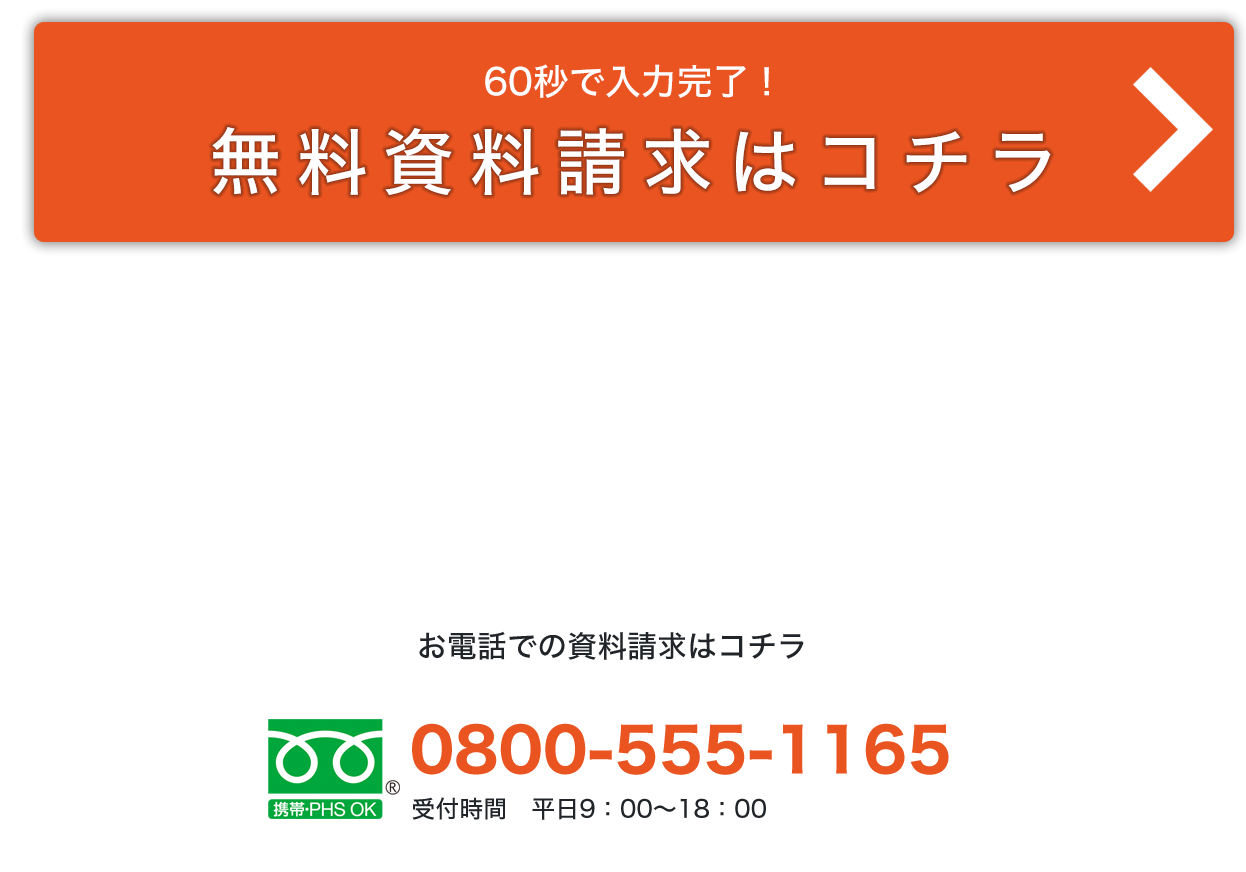
<style>
.page{position:relative;width:1246px;height:872px;background:#ffffff}
.page>*{position:absolute;margin:0}
.t1{font:36px "HiraginoSans-W5";color:#ffffff}
.t2{font:72px "HiraginoSans-W5";letter-spacing:0.2em;color:#ffffff}
.t3{font:30px "HiraginoSans-W5";color:#212529}
.t4{font:60px "HiraginoSans-W7";color:#e95420}
.t5{font:24px "HiraginoSans-W5";color:#212529}
</style>
<div class="page">
<p class="t1" style="left:485px;top:64px;width:284px;height:34px">60秒で入力完了！</p>
<p class="t2" style="left:212px;top:127px;width:839px;height:68px">無料資料請求はコチラ</p>
<p class="t3" style="left:419px;top:631px;width:385px;height:29px">お電話での資料請求はコチラ</p>
<p class="t4" style="left:412px;top:723px;width:537px;height:52px">0800-555-1165</p>
<p class="t5" style="left:412px;top:797px;width:354px;height:23px">受付時間　平日9：00〜18：00</p>
</div>
